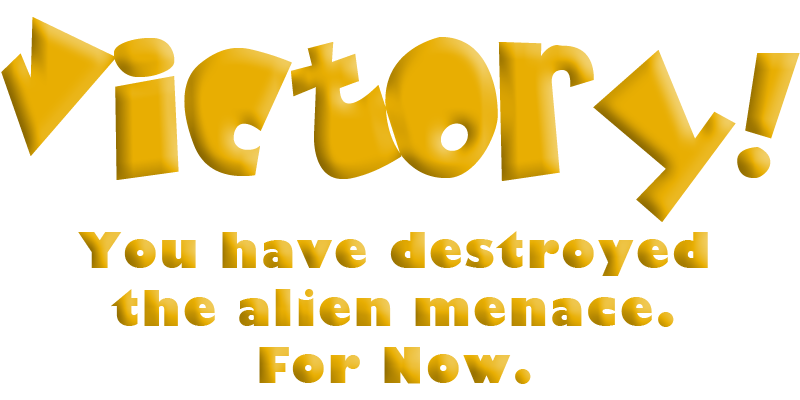
<style>
.page{position:relative;width:800px;height:400px;background:#ffffff}
.page>*{position:absolute;margin:0}
.t1{font:169px "BabyKruffy";letter-spacing:0.05em}
.t2{font:48px "GillSans-UltraBold";letter-spacing:0.05em}
</style>
<div class="page">
<p class="t1" style="left:1px;top:17px;width:799px;height:205px">Victory!</p>
<p class="t2" style="left:78px;top:231px;width:630px;height:153px;text-align:center">You have destroyed<br>the alien menace.<br>For Now.</p>
</div>
